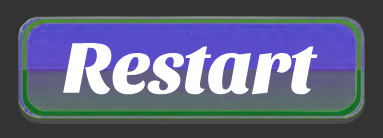
<style>
.page{position:relative;width:383px;height:138px;background:#333333}
.page>*{position:absolute;margin:0}
.t1{font:75px "Sansita-ExtraBoldItalic";color:#ffffff}
</style>
<div class="page">
<p class="t1" style="left:63px;top:42px;width:255px;height:53px">Restart</p>
</div>
